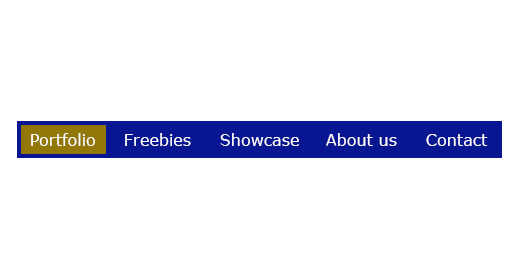
<style>
.page{position:relative;width:518px;height:260px;background:#ffffff}
.page>*{position:absolute;margin:0}
.t1{font:16px "Verdana";color:#ffffff}
</style>
<div class="page">
<p class="t1" style="left:31px;top:133px;width:64px;height:13px">Portfolio</p>
<p class="t1" style="left:125px;top:133px;width:66px;height:13px">Freebies</p>
<p class="t1" style="left:220px;top:133px;width:79px;height:13px">Showcase</p>
<p class="t1" style="left:326px;top:133px;width:71px;height:13px">About us</p>
<p class="t1" style="left:426px;top:134px;width:62px;height:12px">Contact</p>
</div>
